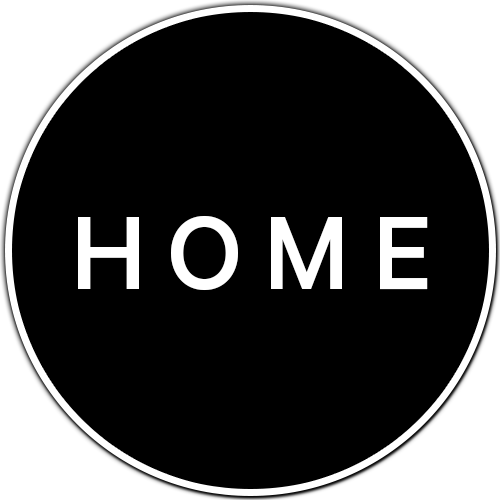
<style>
.page{position:relative;width:500px;height:500px;background:#000000}
.page>*{position:absolute;margin:0}
.t1{font:117.4px "Calibre-Medium";letter-spacing:0.18em;color:#ffffff}
</style>
<div class="page">
<p class="t1" style="left:78px;top:215px;width:350px;height:76px">HOME</p>
</div>
